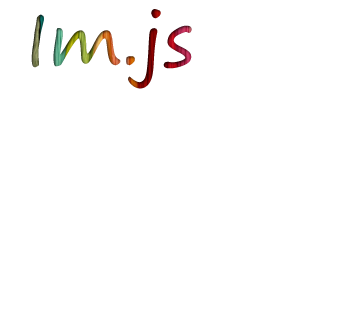
<style>
.page{position:relative;width:363px;height:325px;background:#ffffff}
.page>*{position:absolute;margin:0}
.t1{font:72px "SegoePrint"}
</style>
<div class="page">
<p class="t1" style="left:31px;top:9px;width:161px;height:80px">Im.js</p>
</div>
